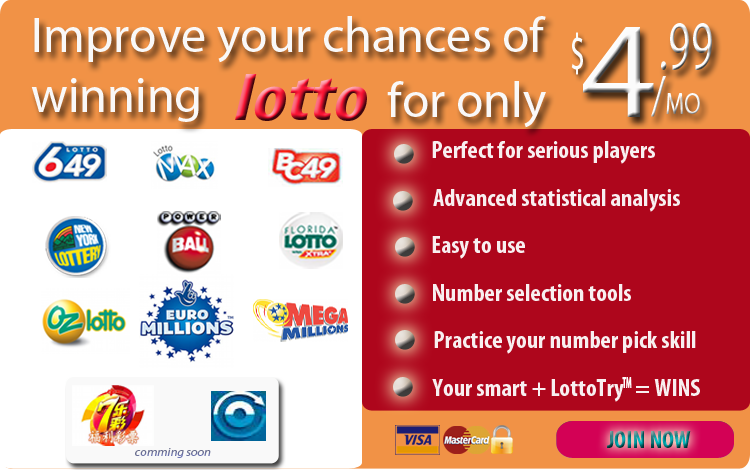
<style>
.page{position:relative;width:750px;height:470px;background:#ae061c}
.page>*{position:absolute;margin:0}
.t1{font:50px "MyriadPro-Regular";color:#f9f8f8}
.t2{font:138.5px "MyriadPro-Regular";color:#fbfbfb;scale:1.06 1}
.t3{font:69.2px "MyriadPro-Regular";color:#fbfbfb;scale:0.65 1}
.t4{font:50.8px "MyriadPro-Regular";color:#fbfbfb;scale:0.6 1}
.t5{font:67.5px "MyriadPro-BoldCondIt";color:#fa1434;scale:1.22 1}
.t6{font:30.5px "MyriadPro-Regular";color:#fbfbfb;scale:0.77 1}
.t7{font:55.9px "MyriadPro-Regular";color:#fbfbfb;scale:0.77 1}
.t8{font:25px "MyriadPro-BoldCond";color:#f8eff0}
.t9{font:16.3px "MyriadPro-BoldCond";color:#fefdfd;scale:0.56 1}
</style>
<div class="page">
<p class="t1" style="left:31px;top:16px;width:515px;height:106px">Improve your chances of <br>winning</p>
<p class="t2" style="left:583px;top:27px;width:71px;height:90px">4</p>
<p class="t3" style="left:661px;top:23px;width:51px;height:47px">.99</p>
<p class="t4" style="left:571px;top:32px;width:12px;height:43px">$</p>
<p class="t5" style="left:235px;top:74px;width:132px;height:47px">lotto</p>
<p class="t6" style="left:651px;top:76px;width:49px;height:41px"><span class="t7">/</span>MO</p>
<p class="t1" style="left:387px;top:81px;width:159px;height:47px">for only</p>
<p class="t8" style="left:432px;top:141px;width:223px;height:23px">Perfect for serious players</p>
<p class="t8" style="left:433px;top:189px;width:247px;height:23px">Advanced statistical analysis</p>
<p class="t8" style="left:432px;top:236px;width:93px;height:23px">Easy to use</p>
<p class="t8" style="left:433px;top:284px;width:198px;height:17px">Number selection tools</p>
<p class="t8" style="left:434px;top:331px;width:262px;height:23px">Practice your number pick skill</p>
<p class="t9" style="left:622px;top:377px;width:10px;height:11px">TM</p>
<p class="t8" style="left:432px;top:379px;width:268px;height:23px">Your smart + LottoTry   = WINS</p>
</div>
